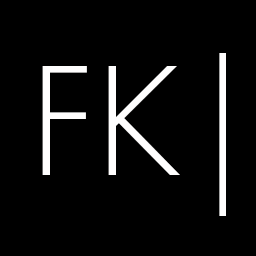
<style>
.page{position:relative;width:256px;height:256px;background:#000000}
.page>*{position:absolute;margin:0}
.t1{font:163px "FuturaPT-Light";color:#fffefe}
</style>
<div class="page">
<p class="t1" style="left:42px;top:53px;width:184px;height:163px">FK|</p>
</div>
